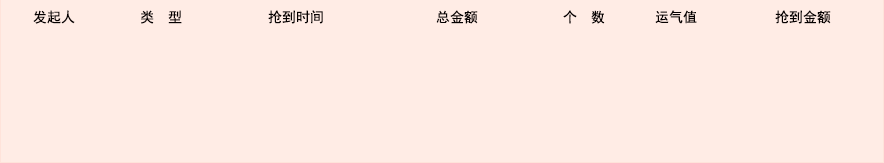
<style>
.page{position:relative;width:884px;height:163px;background:#ffece5}
.page>*{position:absolute;margin:0}
.t1{font:14px "SimHei";color:#050000}
</style>
<div class="page">
<p class="t1" style="left:33px;top:10px;width:42px;height:14px">发起人</p>
<p class="t1" style="left:141px;top:10px;width:41px;height:14px">类  型</p>
<p class="t1" style="left:268px;top:10px;width:55px;height:14px">抢到时间</p>
<p class="t1" style="left:436px;top:10px;width:42px;height:14px">总金额</p>
<p class="t1" style="left:563px;top:10px;width:42px;height:14px">个  数</p>
<p class="t1" style="left:655px;top:10px;width:42px;height:14px">运气值</p>
<p class="t1" style="left:775px;top:10px;width:56px;height:14px">抢到金额</p>
</div>
